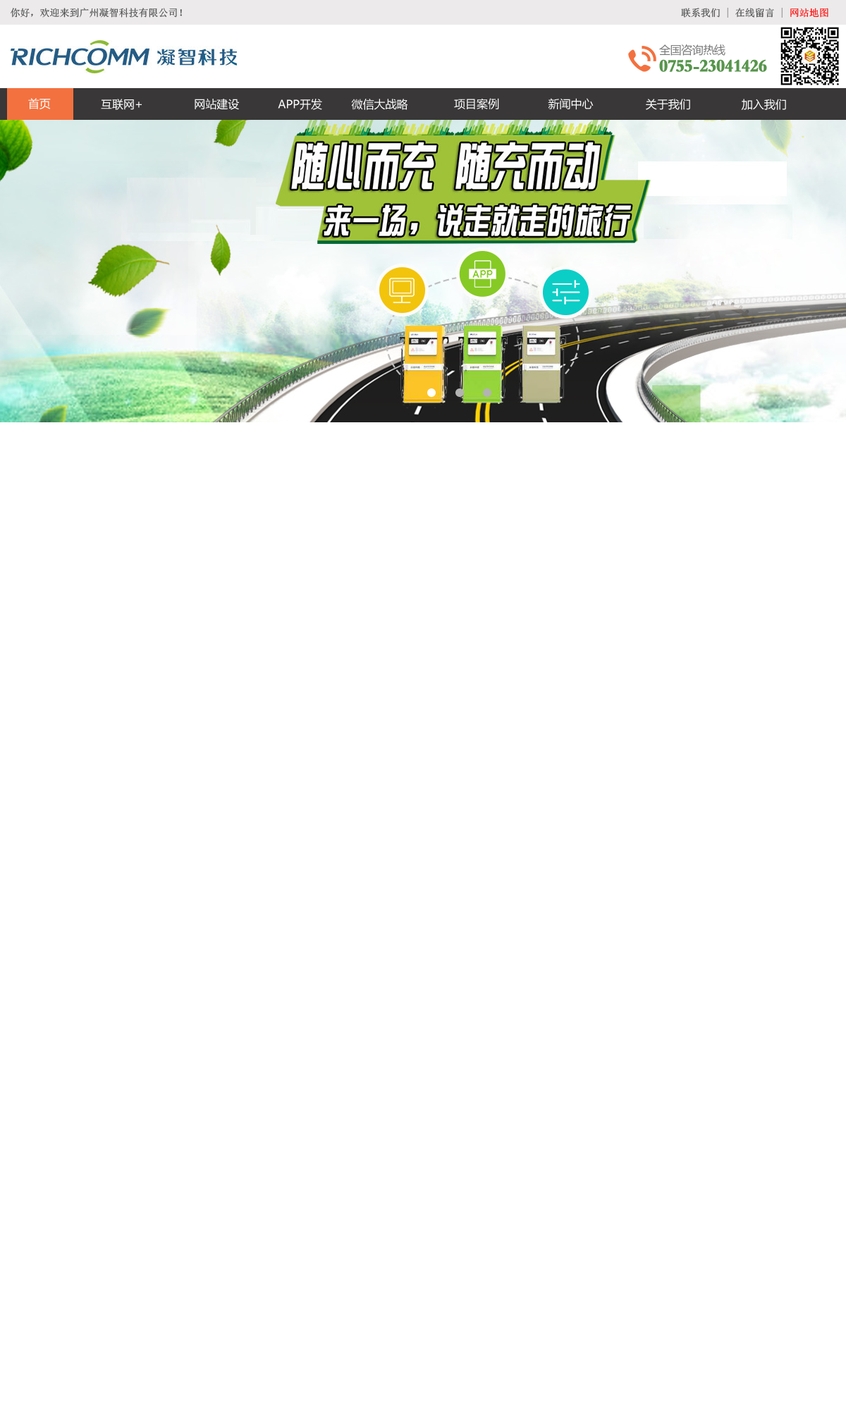
<style>
.page{position:relative;width:846px;height:1410px;background:#ffffff}
.page>*{position:absolute;margin:0}
.t1{font:9.9px "SimSun";color:#4c4c4c}
.t2{font:9.9px "SimSun";color:#ff0000}
.t3{font:11.3px "MicrosoftYaHei";color:#ffffff}
</style>
<div class="page">
<p class="t1" style="left:11px;top:8px;width:171px;height:10px">你好，欢迎来到广州凝智科技有限公司！</p>
<p class="t1" style="left:681px;top:8px;width:147px;height:10px">联系我们 | 在线留言 | <span class="t2">网站地图</span></p>
<p class="t3" style="left:28px;top:98px;width:23px;height:11px">首页</p>
<p class="t3" style="left:101px;top:99px;width:41px;height:11px">互联网+</p>
<p class="t3" style="left:195px;top:98px;width:44px;height:12px">网站建设</p>
<p class="t3" style="left:278px;top:99px;width:44px;height:11px">APP开发</p>
<p class="t3" style="left:351px;top:99px;width:57px;height:11px">微信大战略</p>
<p class="t3" style="left:454px;top:98px;width:45px;height:12px">项目案例</p>
<p class="t3" style="left:548px;top:98px;width:46px;height:12px">新闻中心</p>
<p class="t3" style="left:646px;top:99px;width:44px;height:11px">关于我们</p>
<p class="t3" style="left:741px;top:99px;width:45px;height:11px">加入我们</p>
</div>
